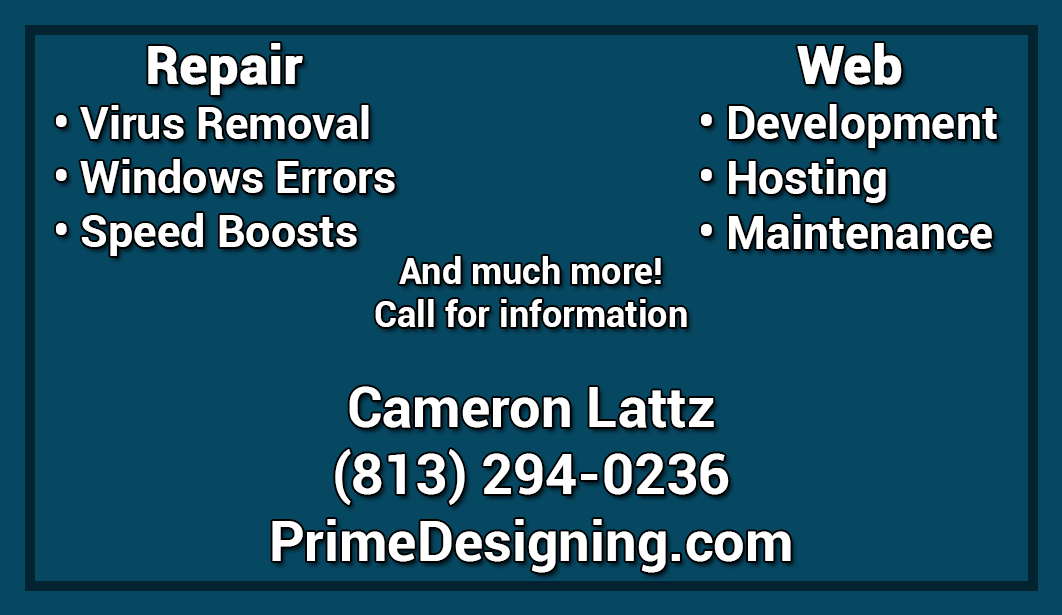
<style>
.page{position:relative;width:1062px;height:615px;background:#064761}
.page>*{position:absolute;margin:0}
.t1{font:52px "Roboto-Bold";color:#ffffff;font-weight:bold}
.t2{font:45px "Roboto-Bold";color:#ffffff}
.t3{font:46px "Roboto-Bold";color:#ffffff}
.t4{font:36px "Roboto-Bold";color:#ffffff}
.t5{font:56px "Roboto-Bold";color:#ffffff}
</style>
<div class="page">
<p class="t1" style="left:148px;top:43px;width:155px;height:52px">Repair</p>
<p class="t1" style="left:797px;top:43px;width:105px;height:42px">Web</p>
<p class="t2" style="left:56px;top:105px;width:339px;height:151px">• Virus Removal<br>• Windows Errors<br>• Speed Boosts</p>
<p class="t3" style="left:701px;top:104px;width:296px;height:145px">• Development<br>• Hosting<br>• Maintenance</p>
<p class="t4" style="left:375px;top:256px;width:312px;height:71px;text-align:center">And much more!<br>Call for information</p>
<p class="t5" style="left:272px;top:386px;width:519px;height:187px;text-align:center">Cameron Lattz<br>(813) 294-0236<br>PrimeDesigning.com</p>
</div>
